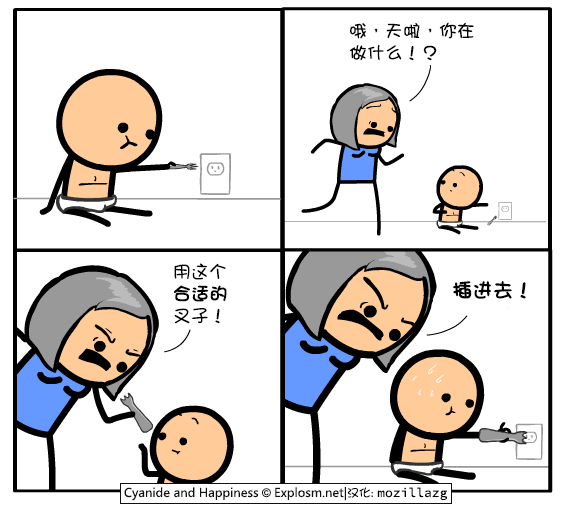
<style>
.page{position:relative;width:573px;height:521px;background:#ffffff}
.page>*{position:absolute;margin:0}
.t1{font:18px/22px "DFGirl";color:#000000}
.t2{font:18px/22px "DFGirl";color:#000000;font-weight:bold}
.t3{font:20px "DFGirl";color:#000000;font-weight:bold}
</style>
<div class="page">
<p class="t1" style="left:349px;top:22px;width:125px;height:39px">哦，天啦，你在<br>做什么！？</p>
<p class="t1" style="left:174px;top:263px;width:53px;height:61px">用这个<br><span class="t2">合适的<br></span>叉子！</p>
<p class="t3" style="left:452px;top:281px;width:74px;height:18px">插进去！</p>
</div>
